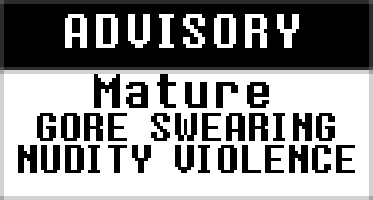
<style>
.page{position:relative;width:373px;height:200px;background:#ffffff}
.page>*{position:absolute;margin:0}
.t1{font:40px "8bitoperatorRegular";color:#ffffff}
.t2{font:40px "8bitoperatorRegular";color:#000000}
.t3{font:33px "8bitoperatorRegular";color:#000000}
</style>
<div class="page">
<p class="t1" style="left:65px;top:14px;width:234px;height:34px">ADVISORY</p>
<p class="t2" style="left:94px;top:74px;width:175px;height:34px">Mature</p>
<p class="t3" style="left:18px;top:113px;width:337px;height:60px;text-align:center">GORE SWEARING<br>NUDITY VIOLENCE</p>
</div>
